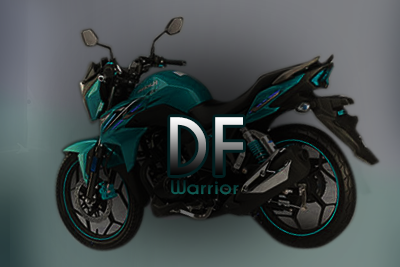
<style>
.page{position:relative;width:400px;height:267px}
.page>*{position:absolute;margin:0}
.t1{font:74px "CaviarDreams-Bold"}
.t2{font:17.9px "CaviarDreams-Bold";color:#0a443f;scale:1.13 1}
</style>
<div class="page">
<p class="t1" style="left:170px;top:117px;width:73px;height:58px">DF</p>
<p class="t2" style="left:171px;top:180px;width:68px;height:15px">Warrior</p>
</div>
